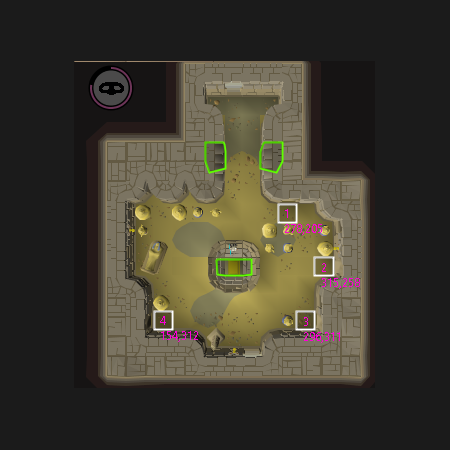
<style>
.page{position:relative;width:450px;height:450px;background:#1b1b1b}
.page>*{position:absolute;margin:0}
.t1{font:12px "SegoeUI";color:#ff00d8}
</style>
<div class="page">
<p class="t1" style="left:285px;top:209px;width:37px;height:26px">1<br>278,205</p>
<p class="t1" style="left:322px;top:263px;width:38px;height:26px">2<br>315,258</p>
<p class="t1" style="left:160px;top:316px;width:38px;height:26px">4<br>154,312</p>
<p class="t1" style="left:304px;top:317px;width:36px;height:26px">3<br>296,311</p>
</div>
